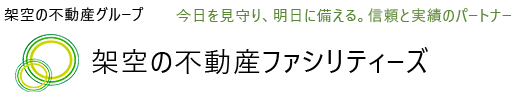
<style>
.page{position:relative;width:524px;height:102px;background:#ffffff}
.page>*{position:absolute;margin:0}
.t1{font:15px "YuGothicUI-Regular";letter-spacing:0.05em;color:#000000}
.t2{font:15px "YuGothicUI-Regular";letter-spacing:0.05em;color:#5b8834}
.t3{font:28px "YuGothicUI-Regular";letter-spacing:0.05em;color:#000000}
</style>
<div class="page">
<p class="t1" style="left:4px;top:7px;width:140px;height:14px">架空の不動産グループ</p>
<p class="t2" style="left:176px;top:8px;width:335px;height:15px">今日を見守り、明日に備える。信頼と実績のパートナー</p>
<p class="t3" style="left:92px;top:47px;width:336px;height:27px">架空の不動産ファシリティーズ</p>
</div>
